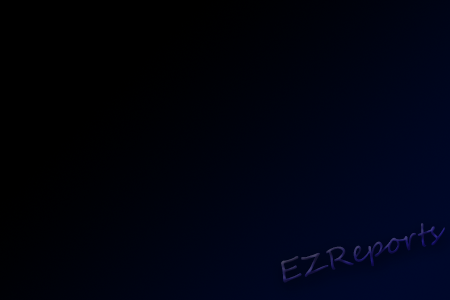
<style>
.page{position:relative;width:450px;height:300px}
.page>*{position:absolute;margin:0}
.t1{font:30px "SegoeScript"}
</style>
<div class="page">
<p class="t1" style="left:281px;top:223px;width:164px;height:60px;rotate:-15deg">EZReports</p>
</div>
